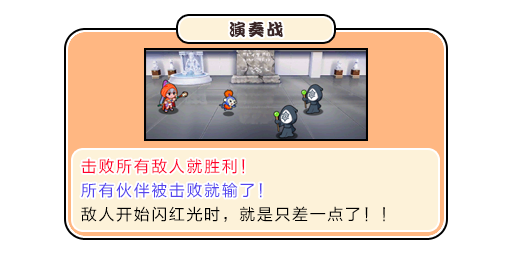
<style>
.page{position:relative;width:512px;height:256px;background:#ffffff}
.page>*{position:absolute;margin:0}
.t1{font:17px "DFPKanTingLiuW9";letter-spacing:0.1em;color:#3b2626}
.t2{font:16px "FZLTHJW--GB1-0";letter-spacing:0.1em;color:#ff002a}
.t3{font:16px "FZLTHJW--GB1-0";letter-spacing:0.1em;color:#5444ed}
.t4{font:16px "FZLTHJW--GB1-0";letter-spacing:0.1em;color:#000000}
</style>
<div class="page">
<p class="t1" style="left:229px;top:21px;width:54px;height:16px">演奏战</p>
<p class="t2" style="left:81px;top:158px;width:164px;height:16px">击败所有敌人就胜利！</p>
<p class="t3" style="left:81px;top:182px;width:181px;height:16px">所有伙伴被击败就输了！</p>
<p class="t4" style="left:81px;top:206px;width:304px;height:16px">敌人开始闪红光时，就是只差一点了！！</p>
</div>
